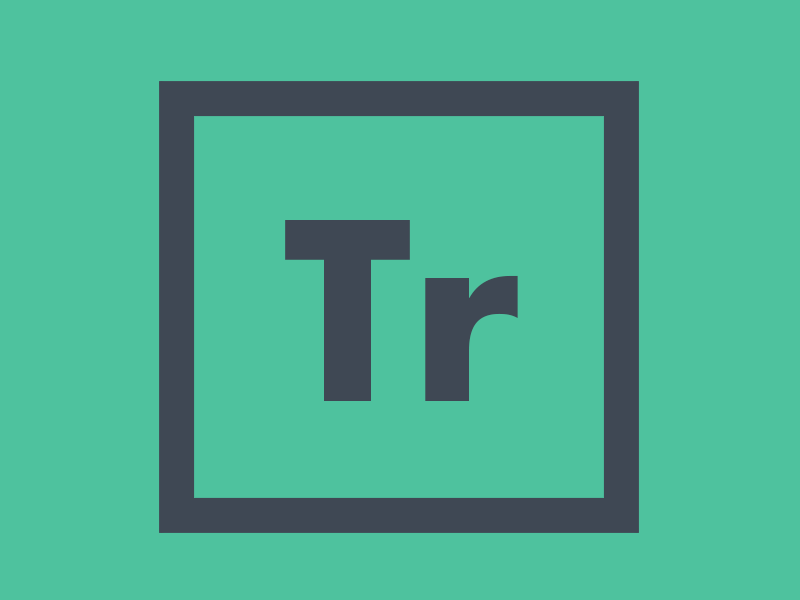
<style>
.page{position:relative;width:800px;height:600px;background:#4ec29e}
.page>*{position:absolute;margin:0}
.t1{font:240px "FuturaStd-Bold";letter-spacing:0.05em;color:#3f4854}
</style>
<div class="page">
<p class="t1" style="left:285px;top:220px;width:233px;height:181px">Tr</p>
</div>
